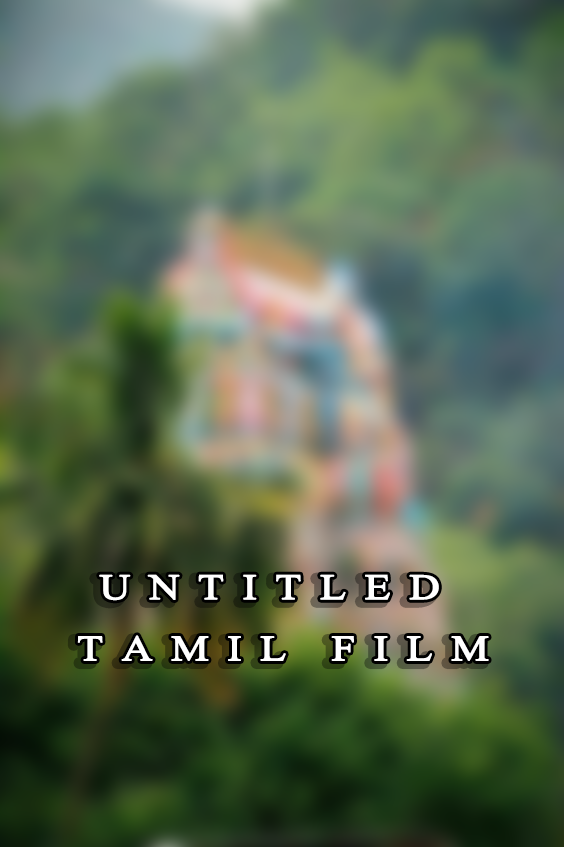
<style>
.page{position:relative;width:564px;height:847px}
.page>*{position:absolute;margin:0}
.t1{font:34.1px/61.3px "GISTMROTDhruvNormal";letter-spacing:0.44em;color:#ffffff;text-transform:uppercase;font-weight:bold;scale:1.18 1}
</style>
<div class="page">
<p class="t1" style="left:77px;top:574px;width:412px;height:87px;text-align:center">Untitled <br>Tamil film</p>
</div>
